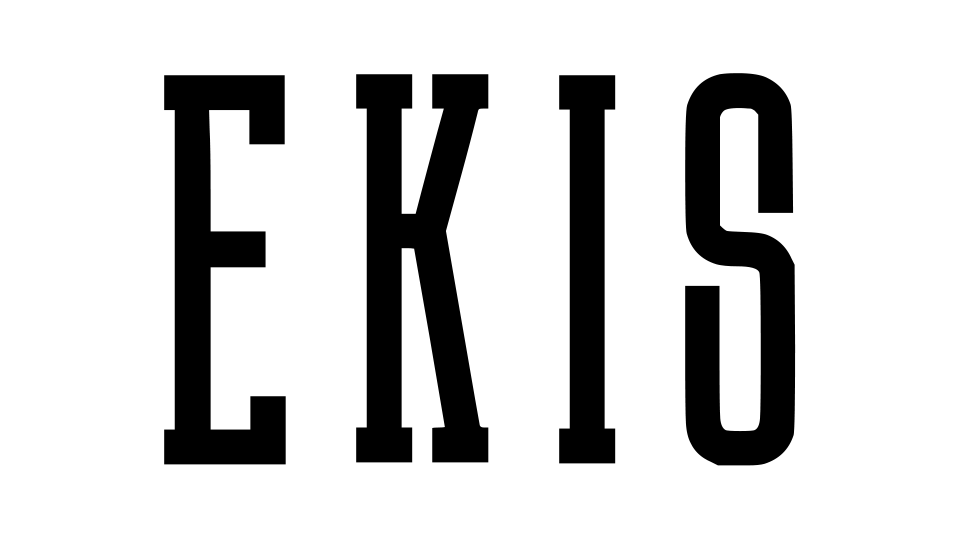
<style>
.page{position:relative;width:960px;height:540px;background:#ffffff}
.page>*{position:absolute;margin:0}
.t1{font:504.2px "DyoblogFont-Regular";letter-spacing:0.04em;color:#000000}
</style>
<div class="page">
<p class="t1" style="left:164px;top:73px;width:632px;height:393px">EKIS</p>
</div>
